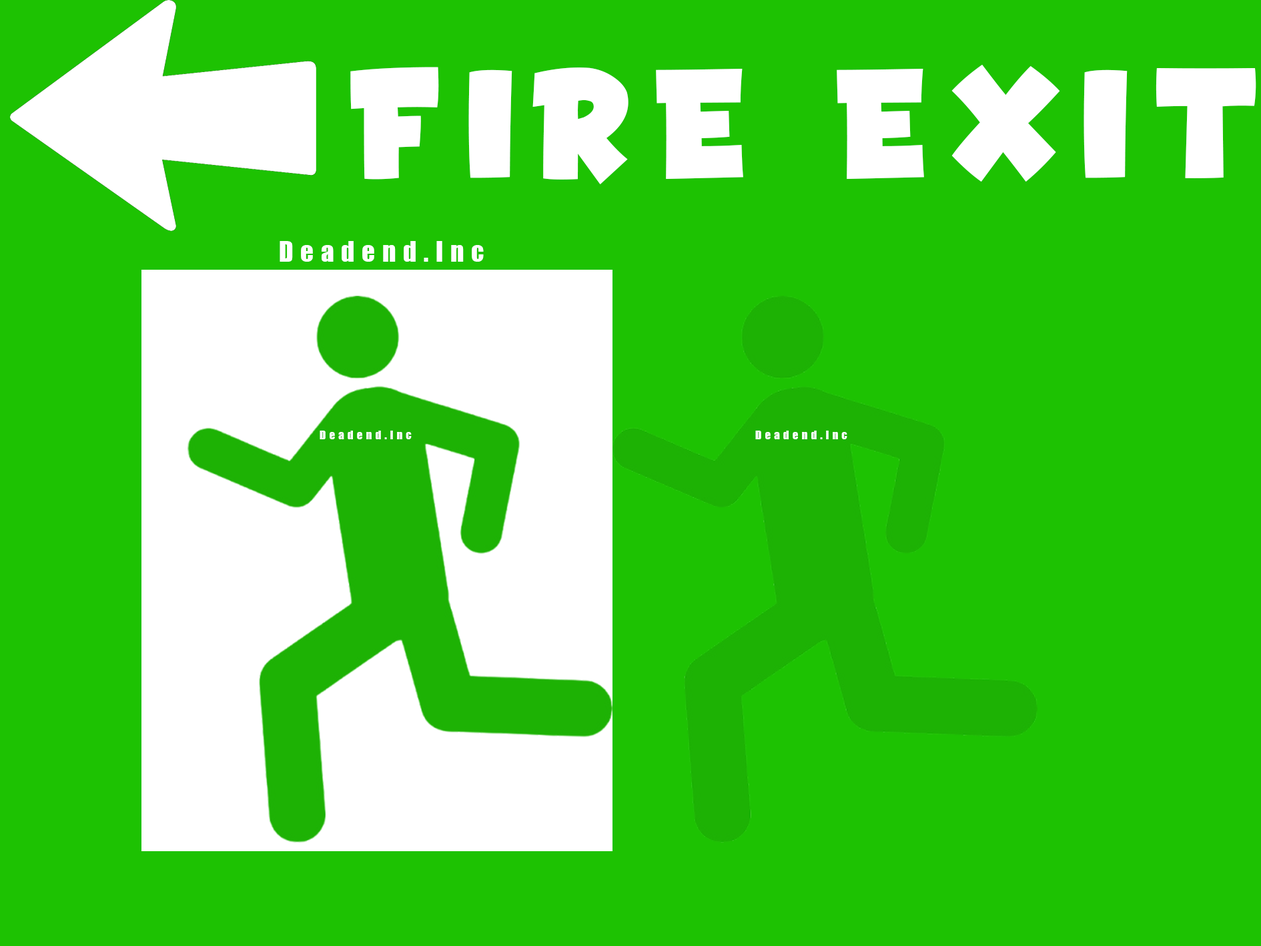
<style>
.page{position:relative;width:1261px;height:946px;background:#1dc202}
.page>*{position:absolute;margin:0}
.t1{font:83.4px "SpaceComics";letter-spacing:0.28em;color:#ffffff}
.t2{font:25.8px "Impact";letter-spacing:0.28em;color:#ffffff}
.t3{font:11.6px "Impact";letter-spacing:0.28em;color:#ffffff}
</style>
<div class="page">
<p class="t1" style="left:350px;top:65px;width:906px;height:119px">FIRE EXIT</p>
<p class="t2" style="left:280px;top:241px;width:204px;height:21px">Deadend.Inc</p>
<p class="t3" style="left:320px;top:430px;width:92px;height:9px">Deadend.Inc</p>
<p class="t3" style="left:755px;top:430px;width:92px;height:9px">Deadend.Inc</p>
</div>
